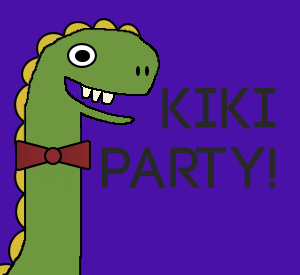
<style>
.page{position:relative;width:300px;height:275px;background:#4a11a8}
.page>*{position:absolute;margin:0}
.t1{font:100px "Code-Pro-Demo";color:#282828}
</style>
<div class="page">
<p class="t1" style="left:162px;top:87px;width:114px;height:42px">Kiki</p>
<p class="t1" style="left:102px;top:146px;width:174px;height:43px">Party!</p>
</div>
